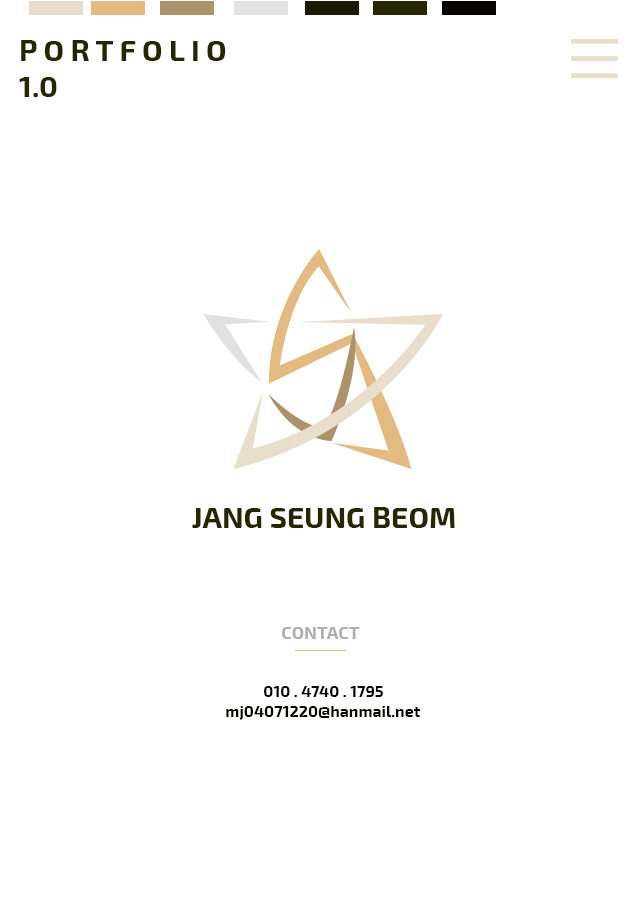
<style>
.page{position:relative;width:640px;height:900px;background:#ffffff}
.page>*{position:absolute;margin:0}
.t1{font:30px "Exo2-Bold";color:#262600}
.t2{font:18px "Exo2-Bold";color:#afafaf}
.t3{font:16px "Exo2-Bold";color:#080600}
</style>
<div class="page">
<p class="t1" style="left:19px;top:40px;width:207px;height:57px">P O R T F O L I O<br>1.0</p>
<p class="t1" style="left:192px;top:507px;width:263px;height:21px">JANG SEUNG BEOM</p>
<p class="t2" style="left:282px;top:627px;width:78px;height:12px">CONTACT</p>
<p class="t3" style="left:264px;top:686px;width:119px;height:11px">010 . 4740 . 1795</p>
<p class="t3" style="left:226px;top:706px;width:194px;height:14px">mj04071220@hanmail.net</p>
</div>
